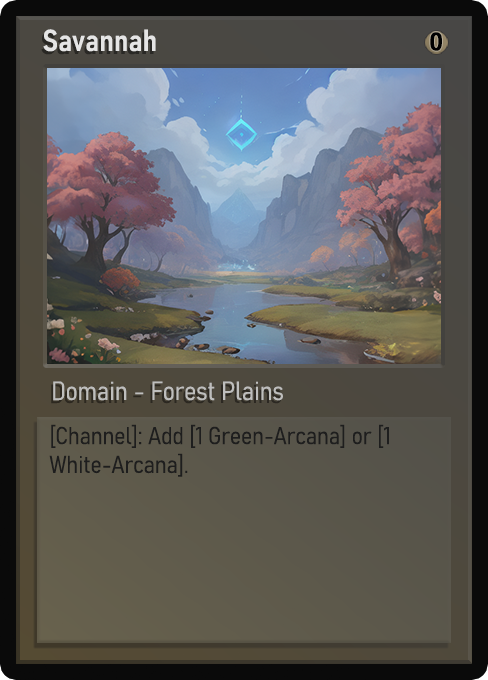
<style>
.page{position:relative;width:488px;height:680px}
.page>*{position:absolute;margin:0}
.t1{font:30px "Bahnschrift-SemiBoldSemiCondensed";color:#f2f2f2;font-weight:bold}
.t2{font:25px "WTRRoycroft";color:#000000;font-weight:bold;scale:1.09 1}
.t3{font:26px "Bahnschrift-LightSemiCondensed";color:#c8c8c8;font-weight:bold}
.t4{font:24px "Bahnschrift-LightSemiCondensed";color:#1e1e1e;font-weight:bold}
</style>
<div class="page">
<p class="t1" style="left:43px;top:29px;width:113px;height:23px;opacity:0.9">Savannah</p>
<p class="t2" style="left:430px;top:32px;width:12px;height:19px">0</p>
<p class="t3" style="left:53px;top:381px;width:230px;height:20px;opacity:0.9">Domain - Forest Plains</p>
<p class="t4" style="left:49px;top:424px;width:340px;height:53px">[Channel]: Add [1 Green-Arcana] or [1 White-Arcana].</p>
</div>
